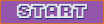
<style>
.page{position:relative;width:104px;height:24px;background:#9454a9}
.page>*{position:absolute;margin:0}
.t1{font:14px "M04_FATAL-FURY";color:#e6e7eb}
</style>
<div class="page">
<p class="t1" style="left:16px;top:3px;width:72px;height:16px">Start</p>
</div>
